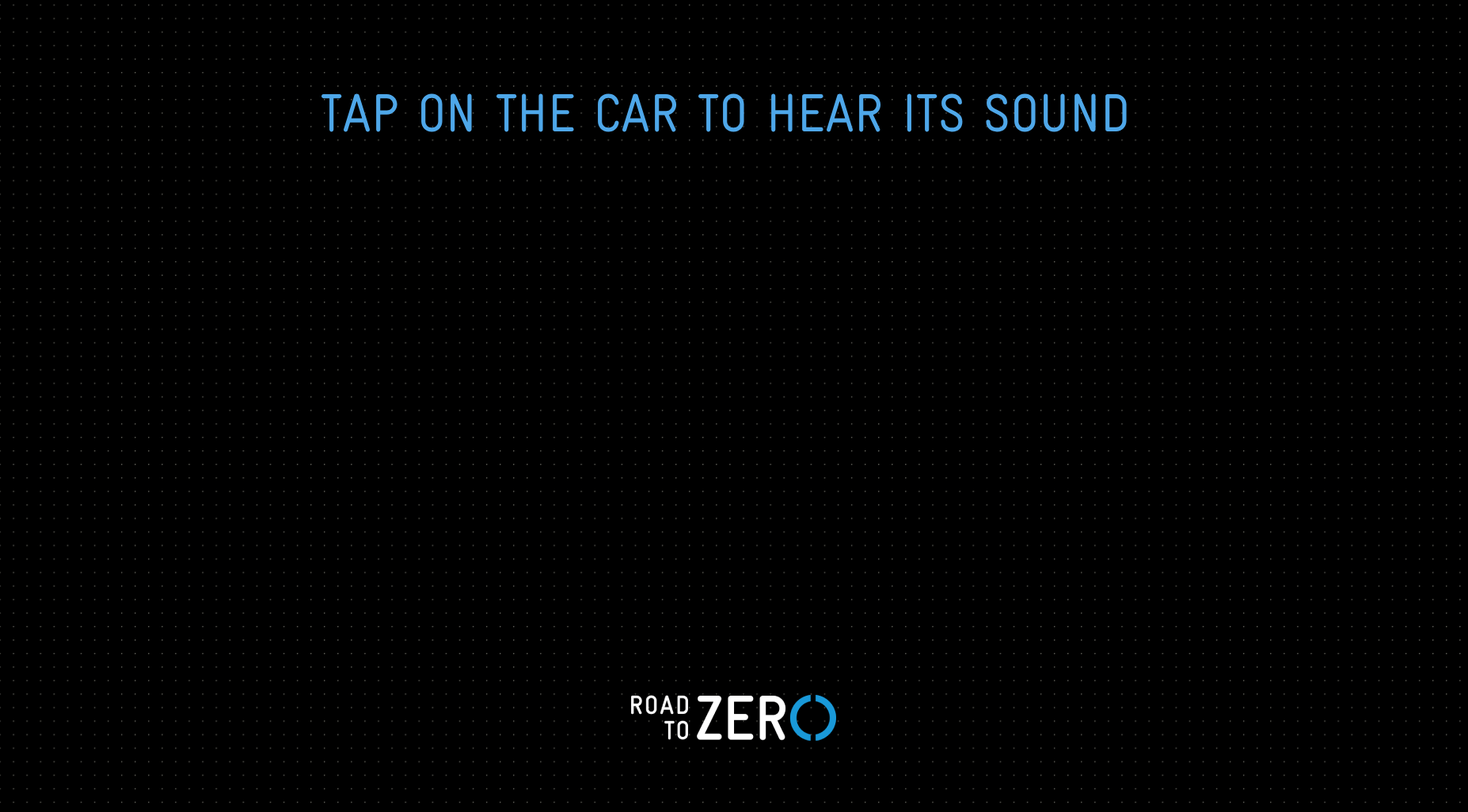
<style>
.page{position:relative;width:1468px;height:812px;background:#000000}
.page>*{position:absolute;margin:0}
.t1{font:53.8px "GravurCondensed-Regular";color:#4ea7e9}
</style>
<div class="page">
<p class="t1" style="left:321px;top:93px;width:806px;height:39px">TAP ON THE CAR TO HEAR ITS SOUND</p>
</div>
